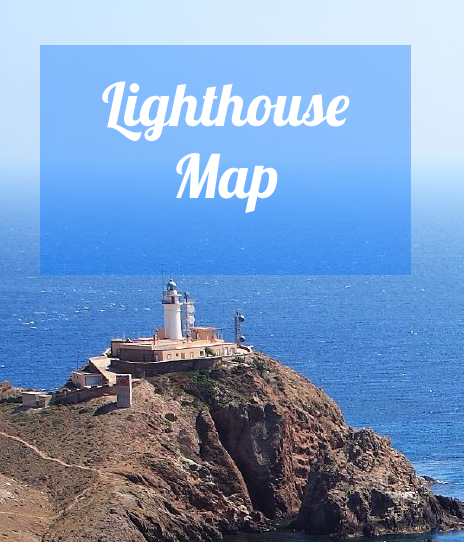
<style>
.page{position:relative;width:464px;height:542px}
.page>*{position:absolute;margin:0}
.t1{font:60px "Lobster1.4";color:#ffffff}
</style>
<div class="page">
<p class="t1" style="left:102px;top:81px;width:248px;height:132px;text-align:center">Lighthouse <br>Map</p>
</div>
